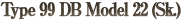
<style>
.page{position:relative;width:193px;height:19px;background:#ffffff}
.page>*{position:absolute;margin:0}
.t1{font:18px "RyuminPro-ExBold";letter-spacing:-0.08em;color:#4a3f32;font-weight:bold;scale:0.9 1}
</style>
<div class="page">
<p class="t1" style="left:0px;top:2px;width:181px;height:18px">Type 99 DB Model 22 (Sk.)</p>
</div>
